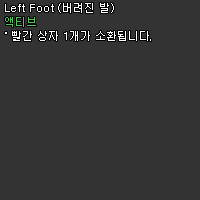
<style>
.page{position:relative;width:200px;height:200px;background:#333333}
.page>*{position:absolute;margin:0}
.t1{font:11px/14px "Dotum";color:#ffffff}
.t2{font:11px/14px "Dotum";color:#56c45b}
</style>
<div class="page">
<p class="t1" style="left:5px;top:3px;width:146px;height:38px">Left Foot (버려진 발)<br><span class="t2">액티브<br></span>˚ 빨간 상자 1개가 소환됩니다.</p>
</div>
